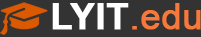
<style>
.page{position:relative;width:201px;height:37px;background:#333333}
.page>*{position:absolute;margin:0}
.t1{font:36px "Arial-BoldMT";color:#ffffff;font-weight:bold}
.t2{font:36px "ArialMT";color:#f6783a;font-weight:bold}
</style>
<div class="page">
<p class="t1" style="left:52px;top:3px;width:149px;height:27px">LYIT<span class="t2">.edu</span></p>
</div>
